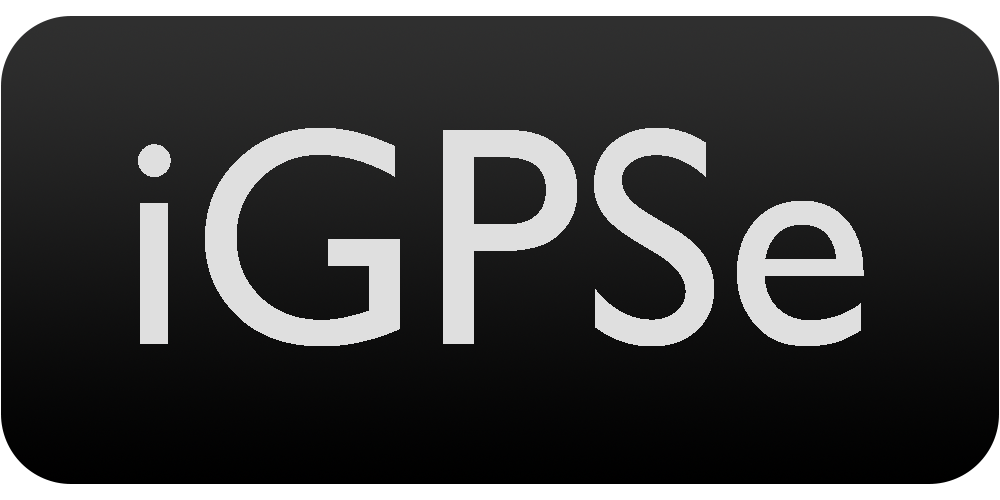
<style>
.page{position:relative;width:1000px;height:500px}
.page>*{position:absolute;margin:0}
.t1{font:313.1px "GillSans";color:#dfdfdf}
</style>
<div class="page">
<p class="t1" style="left:138px;top:128px;width:726px;height:218px">iGPSe</p>
</div>
